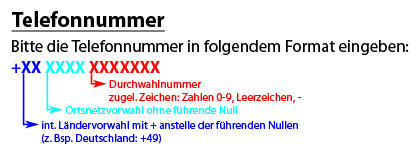
<style>
.page{position:relative;width:420px;height:156px;background:#ffffff}
.page>*{position:absolute;margin:0}
.t1{font:21.5px "MyriadPro-Bold";color:#000000;text-decoration:underline}
.t2{font:16.8px "MyriadPro-Regular";color:#000000}
.t3{font:16.8px "MyriadPro-Bold";color:#ff0000}
.t4{font:16.8px "MyriadPro-Bold";color:#0000ff}
.t5{font:16.8px "MyriadPro-Bold";color:#00ffff}
.t6{font:11.3px "MyriadPro-Regular";color:#ff0000}
.t7{font:11.3px "MyriadPro-Regular";color:#00ffff}
.t8{font:11.3px "MyriadPro-Regular";color:#0000ff}
.t9{font:11.3px "MyriadPro-Bold";color:#0000ff}
</style>
<div class="page">
<p class="t1" style="left:11px;top:11px;width:154px;height:21px">Telefonnummer</p>
<p class="t2" style="left:12px;top:40px;width:397px;height:15px">Bitte die Telefonnummer in folgendem Format eingeben:</p>
<p class="t3" style="left:11px;top:61px;width:149px;height:12px"><span class="t4">+XX </span><span class="t5">XXXX </span>XXXXXXX</p>
<p class="t6" style="left:109px;top:80px;width:192px;height:23px">Durchwahlnummer<br>zugel. Zeichen: Zahlen 0-9, Leerzeichen, -</p>
<p class="t7" style="left:65px;top:106px;width:172px;height:8px">Ortsnetzvorwahl ohne führende Null</p>
<p class="t8" style="left:41px;top:121px;width:257px;height:23px">int. Ländervorwahl mit <span class="t9">+</span> anstelle der führenden Nullen<br>(z. Bsp. Deutschland: +49)</p>
</div>
